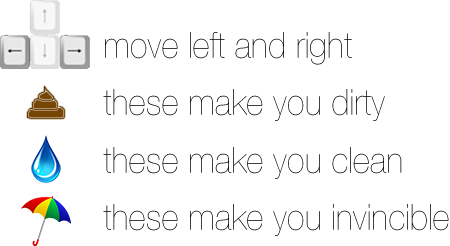
<style>
.page{position:relative;width:450px;height:246px;background:#ffffff}
.page>*{position:absolute;margin:0}
.t1{font:36px "HelveticaNeue-UltraLight";color:#000000;scale:0.95 1}
</style>
<div class="page">
<p class="t1" style="left:105px;top:32px;width:247px;height:33px">move left and right</p>
<p class="t1" style="left:103px;top:89px;width:282px;height:32px">these make you dirty</p>
<p class="t1" style="left:103px;top:147px;width:299px;height:32px">these make you clean</p>
<p class="t1" style="left:103px;top:204px;width:346px;height:32px">these make you invincible</p>
</div>
